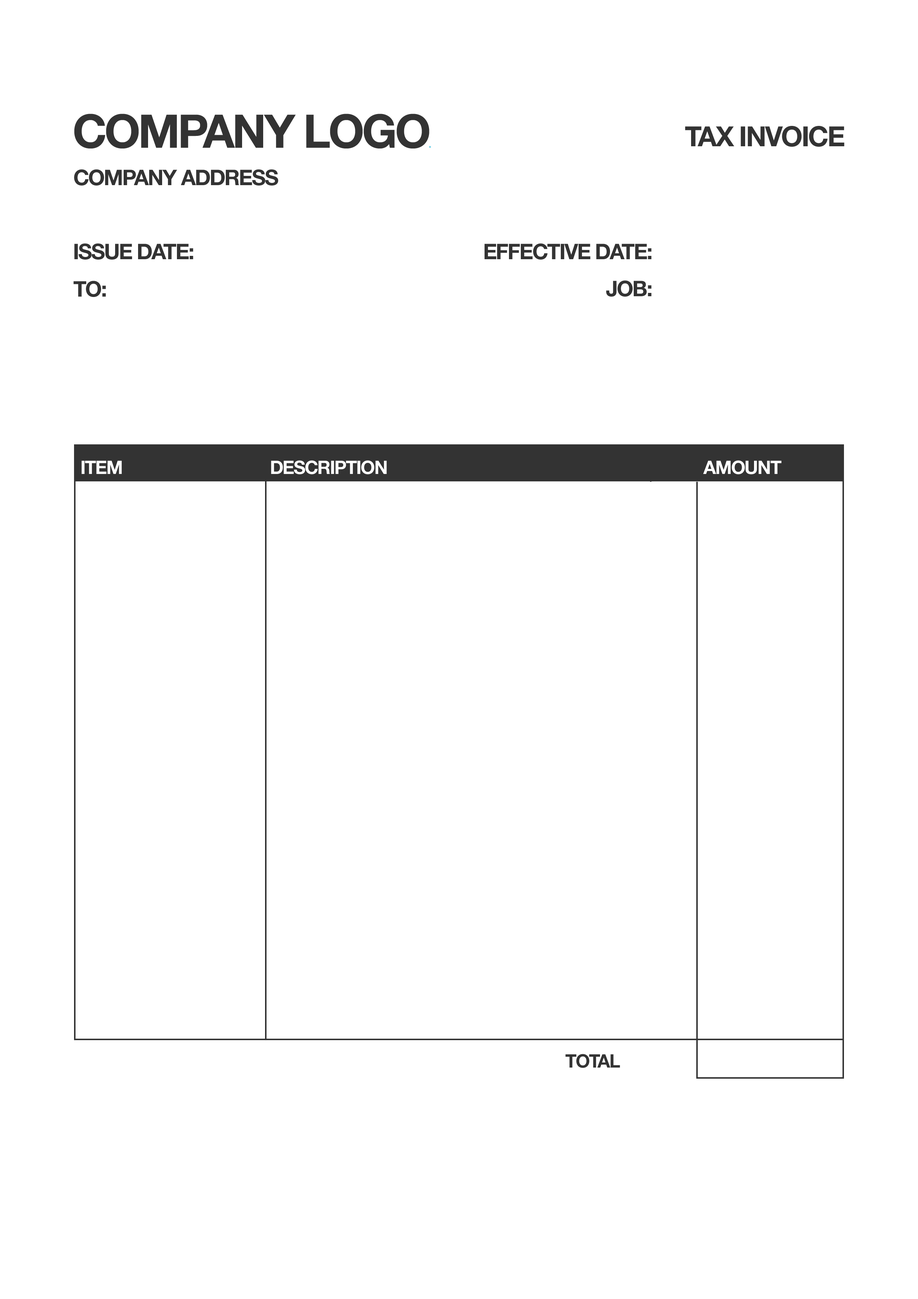
<style>
.page{position:relative;width:918px;height:1299px;background:#ffffff}
.page>*{position:absolute;margin:0}
.t1{font:46.3px "HelveticaNeue-Bold";letter-spacing:-0.05em;color:#333333}
.t2{font:11.1px "HelveticaNeue-Bold";letter-spacing:-0.05em;color:#79d2e7}
.t3{font:27.8px "HelveticaNeue-Bold";letter-spacing:-0.05em;color:#333333}
.t4{font:21.6px "HelveticaNeue-Bold";letter-spacing:-0.05em;color:#333333}
.t5{font:18.5px "HelveticaNeue-Bold";letter-spacing:-0.05em;color:#ffffff}
.t6{font:18.5px "HelveticaNeue-Bold";letter-spacing:-0.05em;color:#333333}
</style>
<div class="page">
<p class="t1" style="left:74px;top:114px;width:357px;height:34px">COMPANY LOGO<span class="t2">.</span></p>
<p class="t3" style="left:685px;top:126px;width:159px;height:21px">TAX INVOICE</p>
<p class="t4" style="left:74px;top:169px;width:204px;height:16px">COMPANY ADDRESS</p>
<p class="t4" style="left:74px;top:243px;width:119px;height:17px">ISSUE DATE:</p>
<p class="t4" style="left:485px;top:243px;width:167px;height:17px">EFFECTIVE DATE:</p>
<p class="t4" style="left:73px;top:281px;width:33px;height:16px">TO:</p>
<p class="t4" style="left:606px;top:280px;width:46px;height:17px">JOB:</p>
<p class="t5" style="left:81px;top:460px;width:701px;height:14px">ITEM                                   DESCRIPTION                                                                           AMOUNT</p>
<p class="t6" style="left:565px;top:1054px;width:55px;height:14px">TOTAL</p>
</div>
